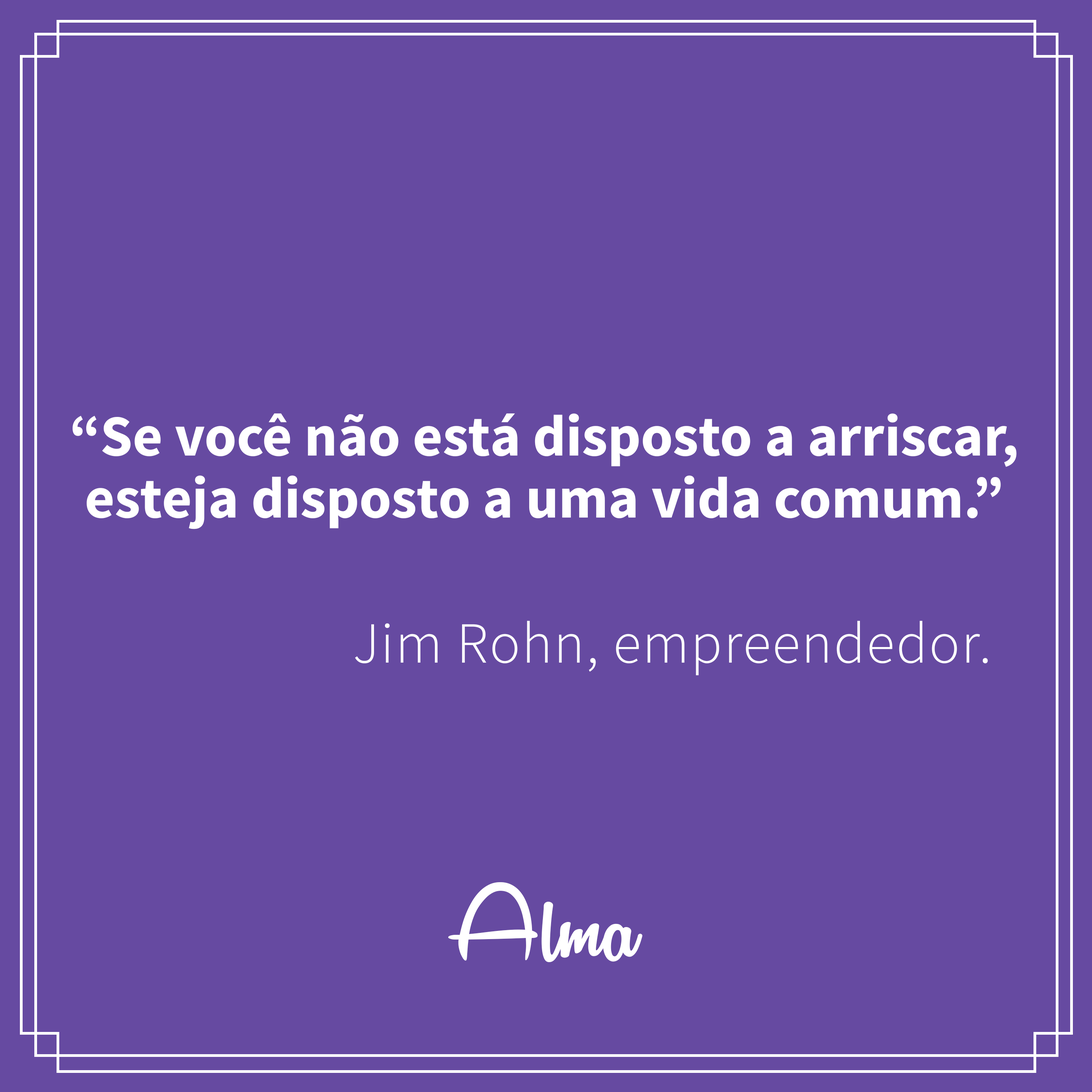
<style>
.page{position:relative;width:1092px;height:1092px;background:#664aa1}
.page>*{position:absolute;margin:0}
.t1{font:57.9px/62.1px "SourceSansPro-Bold";color:#ffffff}
.t2{font:57.9px "SourceSansPro-Light";letter-spacing:0.026em;color:#ffffff}
.t3{font:119.5px "RemachineScriptPersonalUse";color:#ffffff}
</style>
<div class="page">
<p class="t1" style="left:73px;top:413px;width:944px;height:116px;text-align:center">“Se você não está disposto a arriscar,<br>esteja disposto a uma vida comum.”</p>
<p class="t2" style="left:355px;top:620px;width:633px;height:55px">Jim Rohn, empreendedor.</p>
<p class="t3" style="left:448px;top:882px;width:194px;height:80px">Alma</p>
</div>
